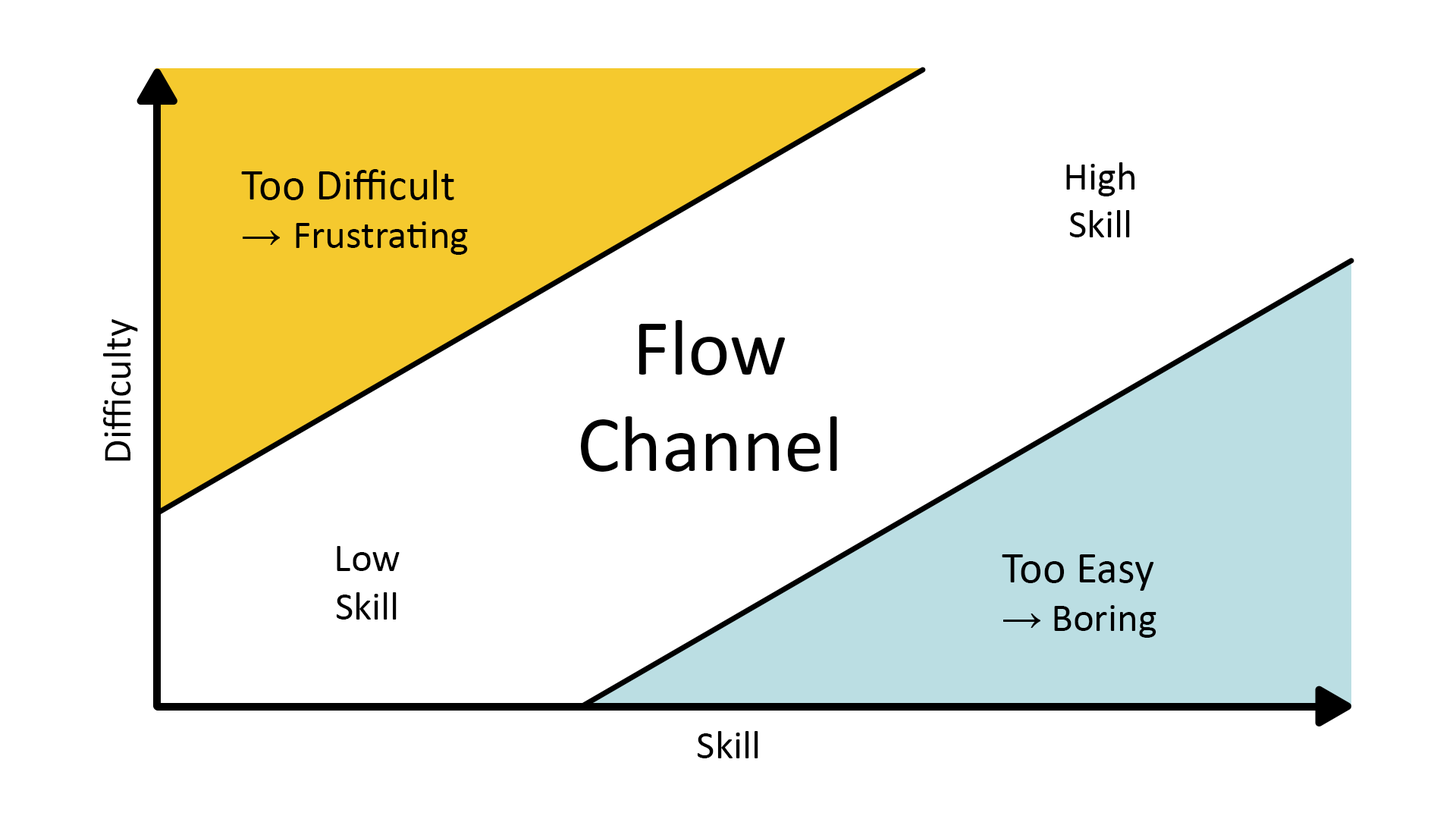
<style>
.page{position:relative;width:1456px;height:819px;background:#ffffff}
.page>*{position:absolute;margin:0}
.t1{font:44.1px "Calibri";color:#000000}
.t2{font:40.1px "Tahoma";color:#000000}
.t3{font:40.1px "Calibri";color:#000000}
.t4{font:80.3px "Calibri";color:#000000}
</style>
<div class="page">
<p class="t1" style="left:241px;top:169px;width:227px;height:86px">Too Difficult <br><span class="t2">→ </span><span class="t3">Frustrating</span></p>
<p class="t3" style="left:1066px;top:162px;width:68px;height:75px;text-align:center">High<br>Skill</p>
<p class="t3" style="left:102px;top:319px;width:36px;height:142px;rotate:-90deg">Difficulty</p>
<p class="t4" style="left:581px;top:320px;width:256px;height:152px;text-align:center">Flow<br>Channel</p>
<p class="t3" style="left:336px;top:546px;width:64px;height:74px;text-align:center">Low<br>Skill</p>
<p class="t1" style="left:1002px;top:554px;width:154px;height:84px">Too Easy <br><span class="t2">→</span><span class="t3"> Boring</span></p>
<p class="t3" style="left:697px;top:731px;width:61px;height:27px">Skill</p>
</div>
